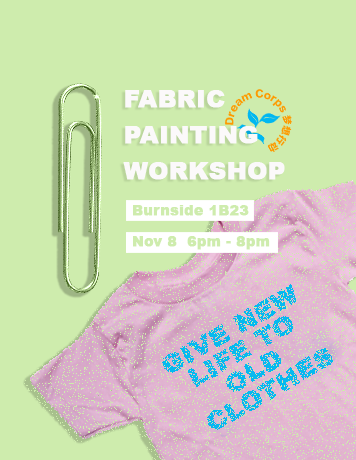
<style>
.page{position:relative;width:356px;height:460px;background:#ceecad}
.page>*{position:absolute;margin:0}
.t1{font:24px/36px "Arial-Black";color:#fbf9fa;font-weight:bold}
.t2{font:14px "Arial-Black";color:#ceecad;font-weight:bold}
</style>
<div class="page">
<p class="t1" style="left:123px;top:90px;width:162px;height:90px">FABRIC<br>PAINTING<br>WORKSHOP</p>
<p class="t2" style="left:133px;top:205px;width:116px;height:11px">Burnside 1B23</p>
<p class="t2" style="left:133px;top:236px;width:137px;height:14px">Nov 8  6pm - 8pm</p>
</div>
